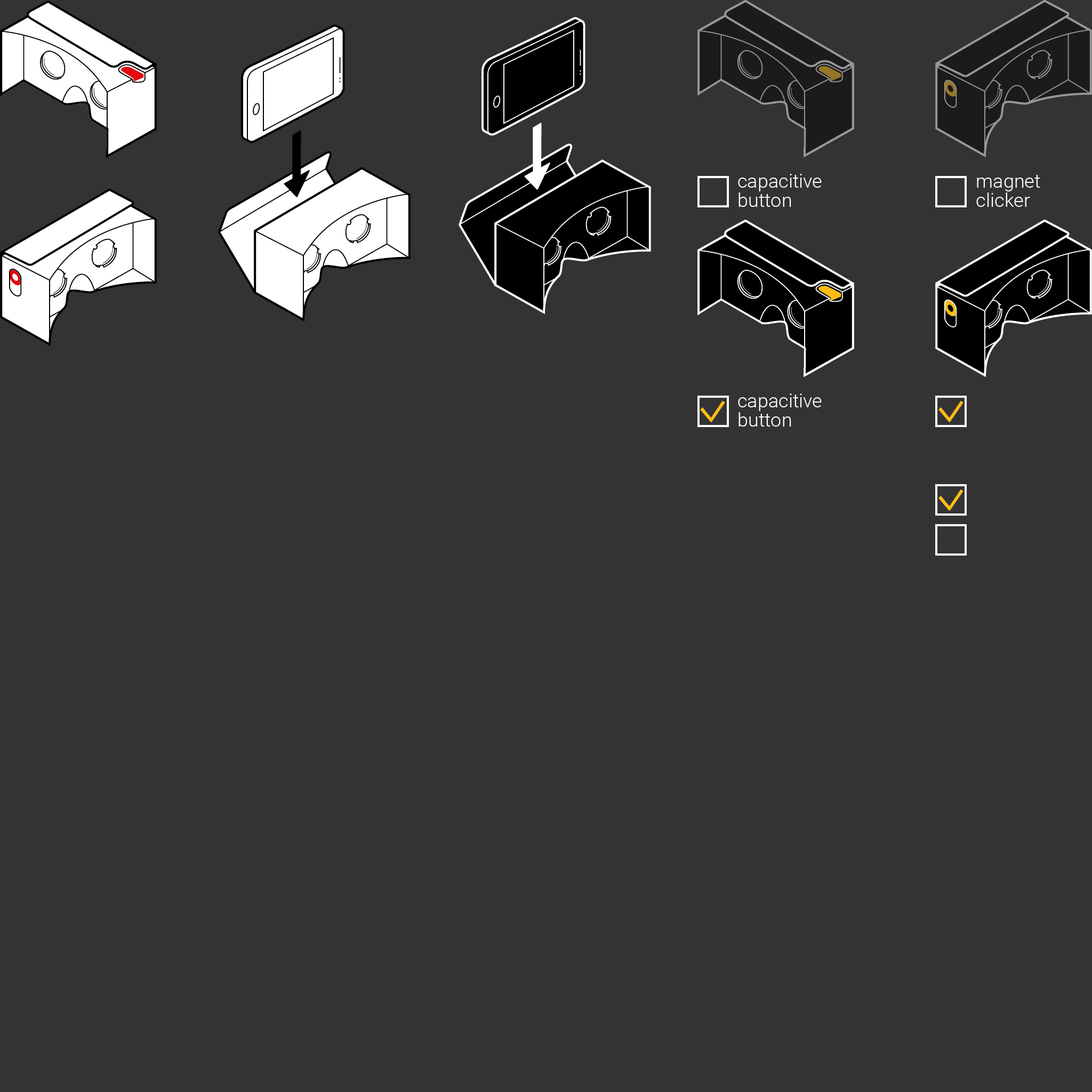
<style>
.page{position:relative;width:1092px;height:1092px;background:#333333}
.page>*{position:absolute;margin:0}
.t1{font:19.2px/19.2px "Roboto-Light";color:#ffffff}
</style>
<div class="page">
<p class="t1" style="left:738px;top:174px;width:84px;height:33px;text-align:right">capacitive<br>button</p>
<p class="t1" style="left:976px;top:175px;width:64px;height:32px;text-align:right">magnet<br>clicker</p>
<p class="t1" style="left:738px;top:393px;width:84px;height:34px;text-align:right">capacitive<br>button</p>
</div>
